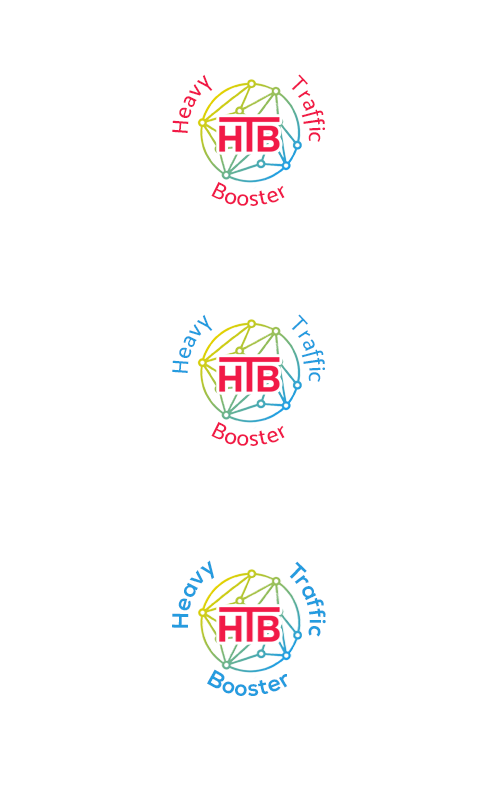
<style>
.page{position:relative;width:500px;height:800px;background:#ffffff}
.page>*{position:absolute;margin:0}
.t1{font:22.8px/31px "MoskMedium500";color:#f11a47}
.t2{font:22.8px "MoskMedium500";letter-spacing:0.05em;color:#f11a47}
.t3{font:22.8px/25.2px "MoskMedium500";color:#259cdf}
.t4{font:22.8px/25.2px "NexaBold";color:#259cdf}
.t5{font:22.8px "NexaBold";letter-spacing:0.05em;color:#259cdf}
</style>
<div class="page">
<p class="t1" style="left:172px;top:74px;width:153px;height:68px;text-align:center">Heavy               Traffic</p>
<p class="t2" style="left:211px;top:181px;width:74px;height:25px">Booster</p>
<p class="t3" style="left:172px;top:314px;width:153px;height:68px;text-align:center">Heavy               Traffic</p>
<p class="t2" style="left:211px;top:421px;width:74px;height:25px">Booster</p>
<p class="t4" style="left:172px;top:560px;width:154px;height:77px;text-align:center">Heavy               Traffic</p>
<p class="t5" style="left:207px;top:669px;width:81px;height:27px">Booster</p>
</div>
